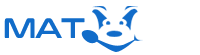
<style>
.page{position:relative;width:200px;height:55px;background:#ffffff}
.page>*{position:absolute;margin:0}
.t1{font:28px "ConthraxSb-Regular";letter-spacing:-0.05em;color:#116cc9}
</style>
<div class="page">
<p class="t1" style="left:4px;top:18px;width:81px;height:20px">MAT</p>
</div>
